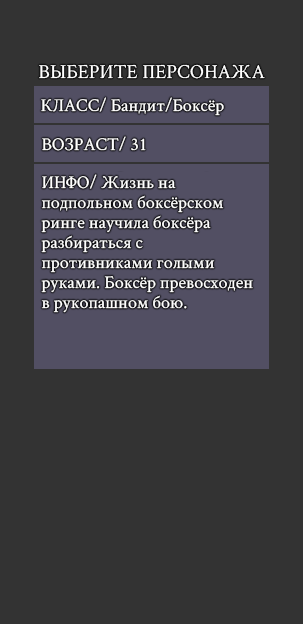
<style>
.page{position:relative;width:303px;height:624px;background:#333333}
.page>*{position:absolute;margin:0}
.t1{font:20px "CrimsonText-Regular";color:#ffffff}
.t2{font:18px "CrimsonText-Regular";color:#ffffff}
.t3{font:18px/20px "CrimsonText-Regular";color:#ffffff}
</style>
<div class="page">
<p class="t1" style="left:39px;top:64px;width:226px;height:15px">ВЫБЕРИТЕ ПЕРСОНАЖА</p>
<p class="t2" style="left:41px;top:97px;width:183px;height:19px">КЛАСС/ Бандит/Боксёр</p>
<p class="t2" style="left:42px;top:136px;width:104px;height:15px">ВОЗРАСТ/ 31</p>
<p class="t3" style="left:41px;top:174px;width:212px;height:139px">ИНФО/ Жизнь на<br>подпольном боксёрском<br>ринге научила боксёра<br>разбираться с<br>противниками голыми<br>руками. Боксёр превосходен<br>в рукопашном бою.</p>
</div>
